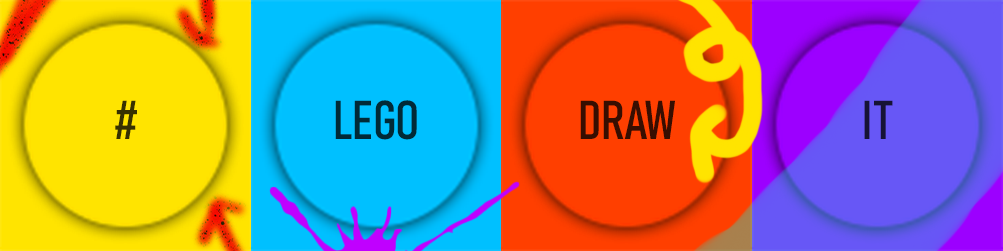
<style>
.page{position:relative;width:1003px;height:251px}
.page>*{position:absolute;margin:0}
.t1{font:53.9px "Bahnschrift-Condensed";color:#373101}
.t2{font:53.9px "Bahnschrift-Condensed";color:#012a37}
.t3{font:53.9px "Bahnschrift-Condensed";color:#370e01}
.t4{font:53.9px "Bahnschrift-Condensed";color:#161335}
</style>
<div class="page">
<p class="t1" style="left:115px;top:100px;width:22px;height:39px">#</p>
<p class="t2" style="left:335px;top:100px;width:82px;height:40px">LEGO</p>
<p class="t3" style="left:580px;top:100px;width:95px;height:39px">DRAW</p>
<p class="t4" style="left:864px;top:100px;width:29px;height:39px">IT</p>
</div>
